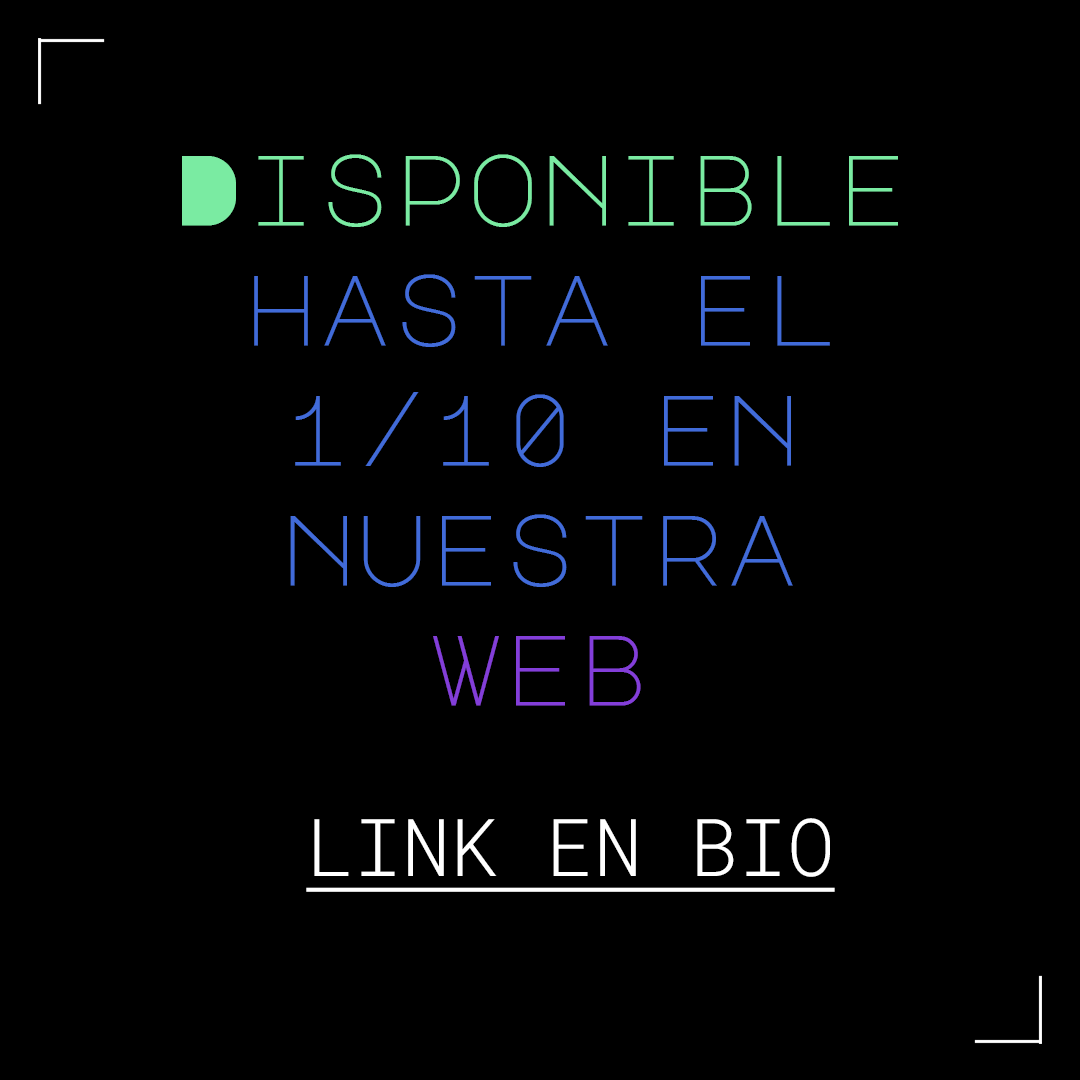
<style>
.page{position:relative;width:1080px;height:1080px;background:#000000}
.page>*{position:absolute;margin:0}
.t1{font:100px "MajorMonoDisplay-Regular";color:#416bd9}
.t2{font:100px "MajorMonoDisplay-Regular";color:#7aeba2}
.t3{font:100px "MajorMonoDisplay-Regular";color:#833ed9}
.t4{font:80px "RobotoMono-Light";color:#ffffff;text-decoration:underline}
</style>
<div class="page">
<p class="t1" style="left:182px;top:154px;width:716px;height:552px;text-align:center"><span class="t2">Disponible </span>hasta el 1/10 en nuestra<span class="t3"> <br>web</span></p>
<p class="t4" style="left:306px;top:818px;width:529px;height:74px">LINK EN BIO</p>
</div>
